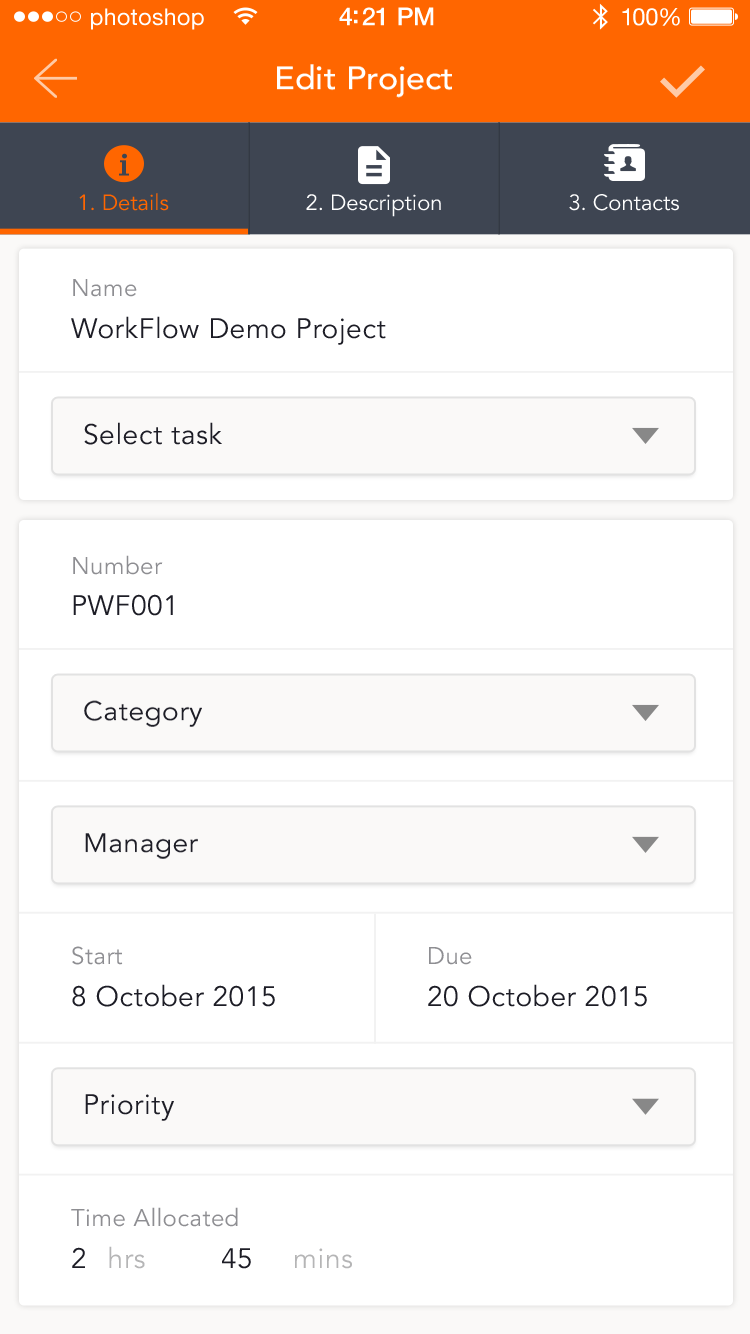
<style>
.page{position:relative;width:750px;height:1334px;background:#ffffff}
.page>*{position:absolute;margin:0}
.t1{font:21.8px "HelveticaNeue";letter-spacing:0.02em;color:#ffffff;scale:1.05 1}
.t2{font:23.7px "HelveticaNeue-Medium";letter-spacing:-0.02em;color:#ffffff;scale:1.05 1}
.t3{font:22.8px "HelveticaNeue";letter-spacing:-0.02em;color:#ffffff;scale:1.05 1}
.t4{font:32.3px "Avenir-Medium";color:#ffffff;scale:1.05 1}
.t5{font:20.9px "Avenir-Book";color:#ff6600;scale:1.05 1}
.t6{font:20.9px "Avenir-Book";color:#ffffff;scale:1.05 1}
.t7{font:22.8px "Avenir-Book";letter-spacing:0.02em;color:#8e8e92;scale:1.05 1}
.t8{font:26.6px "Avenir-Book";letter-spacing:0.02em;color:#1d1d26;scale:1.05 1}
.t9{font:26.6px "Avenir-Book";letter-spacing:0.02em;color:#b5b5b6;scale:1.05 1}
</style>
<div class="page">
<p class="t1" style="left:91px;top:8px;width:113px;height:22px">photoshop</p>
<p class="t2" style="left:339px;top:7px;width:95px;height:19px">4:21 PM</p>
<p class="t3" style="left:622px;top:8px;width:58px;height:18px">100%</p>
<p class="t4" style="left:277px;top:64px;width:175px;height:34px">Edit Project</p>
<p class="t5" style="left:79px;top:193px;width:90px;height:18px">1. Details</p>
<p class="t6" style="left:306px;top:194px;width:135px;height:23px">2. Description</p>
<p class="t6" style="left:569px;top:194px;width:110px;height:17px">3. Contacts</p>
<p class="t7" style="left:73px;top:279px;width:64px;height:18px">Name</p>
<p class="t8" style="left:71px;top:316px;width:315px;height:29px">WorkFlow Demo Project</p>
<p class="t8" style="left:84px;top:422px;width:138px;height:23px">Select task</p>
<p class="t7" style="left:73px;top:555px;width:90px;height:20px">Number</p>
<p class="t8" style="left:73px;top:594px;width:100px;height:22px">PWF001</p>
<p class="t8" style="left:84px;top:700px;width:118px;height:27px">Category</p>
<p class="t8" style="left:85px;top:833px;width:113px;height:26px">Manager</p>
<p class="t7" style="left:72px;top:946px;width:51px;height:19px">Start</p>
<p class="t7" style="left:429px;top:947px;width:43px;height:18px">Due</p>
<p class="t8" style="left:72px;top:984px;width:203px;height:23px">8 October 2015</p>
<p class="t8" style="left:428px;top:984px;width:219px;height:23px">20 October 2015</p>
<p class="t8" style="left:85px;top:1094px;width:89px;height:27px">Priority</p>
<p class="t7" style="left:71px;top:1207px;width:167px;height:20px">Time Allocated</p>
<p class="t9" style="left:72px;top:1246px;width:73px;height:23px"><span class="t8">2 </span>hrs</p>
<p class="t9" style="left:222px;top:1248px;width:130px;height:21px"><span class="t8">45  </span>mins</p>
</div>
